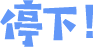
<style>
.page{position:relative;width:93px;height:47px;background:#ffffff}
.page>*{position:absolute;margin:0}
.t1{font:50px "HYZhuZiMuTouRenW";color:#6297f8}
</style>
<div class="page">
<p class="t1" style="left:0px;top:0px;width:94px;height:47px">停下！</p>
</div>
